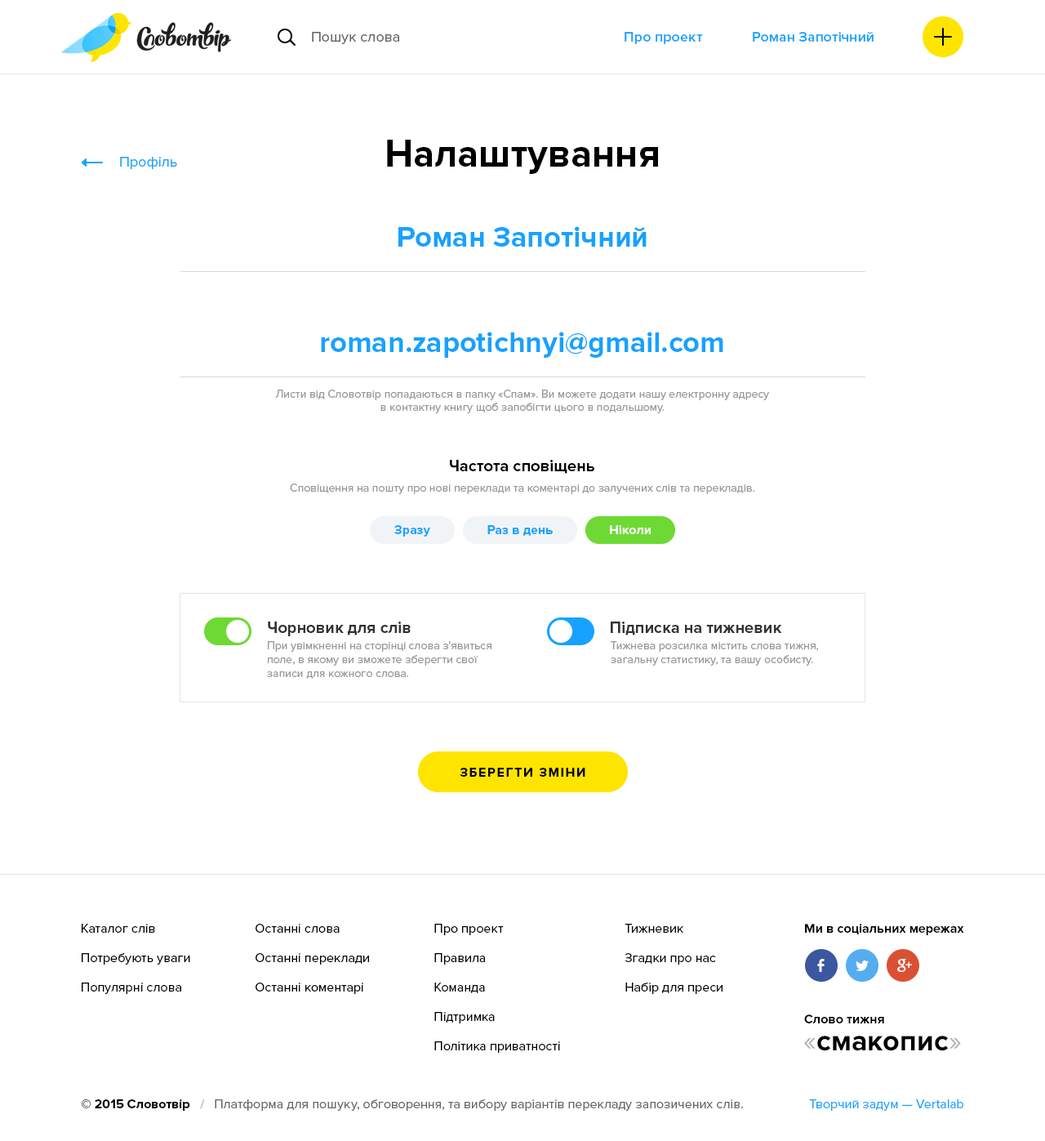
<style>
.page{position:relative;width:1045px;height:1141px;background:#ffffff}
.page>*{position:absolute;margin:0}
.t1{font:14.7px "ProximaNova-Regular";color:#666666}
.t2{font:14.7px "ProximaNova-Semibold";color:#17a2ff}
.t3{font:39.2px "ProximaNova-Bold";color:#000000}
.t4{font:14.7px "ProximaNova-Regular";color:#17a2ff}
.t5{font:29.4px "ProximaNova-Bold";color:#17a2ff}
.t6{font:11.4px/13.1px "ProximaNova-Regular";color:#999999}
.t7{font:16.3px "ProximaNova-Bold";color:#000000}
.t8{font:11.4px "ProximaNova-Regular";color:#999999}
.t9{font:13.1px "ProximaNova-Bold";color:#17a2ff}
.t10{font:13.1px "ProximaNova-Bold";color:#ffffff}
.t11{font:16.3px "ProximaNova-Bold";color:#333333}
.t12{font:13.1px "ProximaNova-Bold";letter-spacing:0.1em;color:#000000;text-transform:uppercase}
.t13{font:13.1px/29.4px "ProximaNova-Regular";color:#000000}
.t14{font:13.1px/29.4px "ProximaNova-Regular";color:#010101}
.t15{font:13.1px "ProximaNova-Bold";color:#010101}
.t16{font:29.4px "ProximaNova-Bold";color:#000000}
.t17{font:29.4px "ProximaNova-Regular";color:#b3b3b3}
.t18{font:13.1px "ProximaNova-Regular";color:#666666}
.t19{font:13.1px "ProximaNova-Bold";color:#000000}
.t20{font:13.1px "ProximaNova-Bold";color:#bfbfbf}
.t21{font:13.1px "ProximaNova-Regular";color:#17a2ff}
</style>
<div class="page">
<p class="t1" style="left:312px;top:32px;width:87px;height:12px">Пошук слова</p>
<p class="t2" style="left:625px;top:32px;width:78px;height:12px">Про проект</p>
<p class="t2" style="left:753px;top:32px;width:121px;height:10px">Роман Запотічний</p>
<p class="t3" style="left:387px;top:140px;width:271px;height:34px">Налаштування</p>
<p class="t4" style="left:120px;top:157px;width:57px;height:12px">Профіль</p>
<p class="t5" style="left:399px;top:226px;width:248px;height:21px">Роман Запотічний</p>
<p class="t5" style="left:321px;top:332px;width:403px;height:26px">roman.zapotichnyi@gmail.com</p>
<p class="t6" style="left:275px;top:390px;width:494px;height:23px;text-align:center">Листи від Словотвір попадаються в папку «Спам». Ви можете додати нашу електронну адресу<br>в контактну книгу щоб запобігти цього в подальшому.</p>
<p class="t7" style="left:450px;top:460px;width:144px;height:14px">Частота сповіщень</p>
<p class="t8" style="left:290px;top:483px;width:465px;height:11px">Сповіщення на пошту про нові переклади та коментарі до залучених слів та перекладів.</p>
<p class="t9" style="left:394px;top:525px;width:36px;height:12px">Зразу</p>
<p class="t9" style="left:488px;top:525px;width:65px;height:11px">Раз в день</p>
<p class="t10" style="left:610px;top:525px;width:41px;height:9px">Ніколи</p>
<p class="t11" style="left:268px;top:621px;width:143px;height:15px">Чорновик для слів</p>
<p class="t11" style="left:611px;top:621px;width:171px;height:14px">Підписка на тижневик</p>
<p class="t8" style="left:267px;top:641px;width:225px;height:38px">При увімкненні на сторінці слова з'явиться<br>поле, в якому ви зможете зберегти свої<br>записи для кожного слова.</p>
<p class="t8" style="left:611px;top:641px;width:207px;height:25px">Тижнева розсилка містить слова тижня,<br>загальну статистику, та вашу особисту.</p>
<p class="t12" style="left:460px;top:768px;width:126px;height:9px">Зберегти зміни</p>
<p class="t13" style="left:82px;top:924px;width:108px;height:70px">Каталог слів<br>Потребують уваги<br>Популярні слова</p>
<p class="t13" style="left:256px;top:924px;width:113px;height:70px">Останні слова<br>Останні переклади<br>Останні коментарі</p>
<p class="t13" style="left:434px;top:924px;width:126px;height:129px">Про проект<br>Правила<br>Команда<br>Підтримка<br>Політика приватності</p>
<p class="t14" style="left:625px;top:924px;width:98px;height:70px">Тижневик<br>Згадки про нас<br>Набір для преси</p>
<p class="t15" style="left:805px;top:924px;width:159px;height:11px">Ми в соціальних мережах</p>
<p class="t15" style="left:804px;top:1014px;width:80px;height:9px">Слово тижня</p>
<p class="t16" style="left:804px;top:1035px;width:157px;height:16px"><span class="t17">«</span>смакопис<span class="t17">»</span></p>
<p class="t18" style="left:82px;top:1099px;width:661px;height:12px"><span class="t19">© 2015 Словотвір   </span><span class="t20">/   </span>Платформа для пошуку, обговорення, та вибору варіантів перекладу запозичених слів.</p>
<p class="t21" style="left:809px;top:1099px;width:155px;height:12px">Творчий задум — Vertalab</p>
</div>
